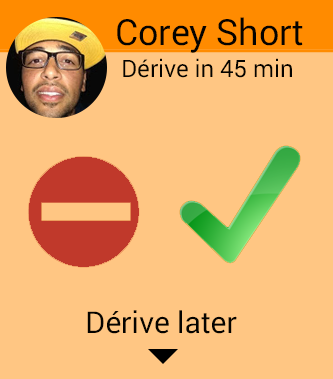
<style>
.page{position:relative;width:333px;height:379px;background:#ffc683}
.page>*{position:absolute;margin:0}
.t1{font:36px "Roboto-Black";color:#050300}
.t2{font:24px "Roboto-Black";color:#050300}
.t3{font:30px "Roboto-Black";color:#050300}
</style>
<div class="page">
<p class="t1" style="left:117px;top:17px;width:186px;height:36px">Corey Short</p>
<p class="t2" style="left:123px;top:58px;width:169px;height:20px">Dérive in 45 min</p>
<p class="t3" style="left:87px;top:310px;width:150px;height:24px">Dérive later</p>
</div>
